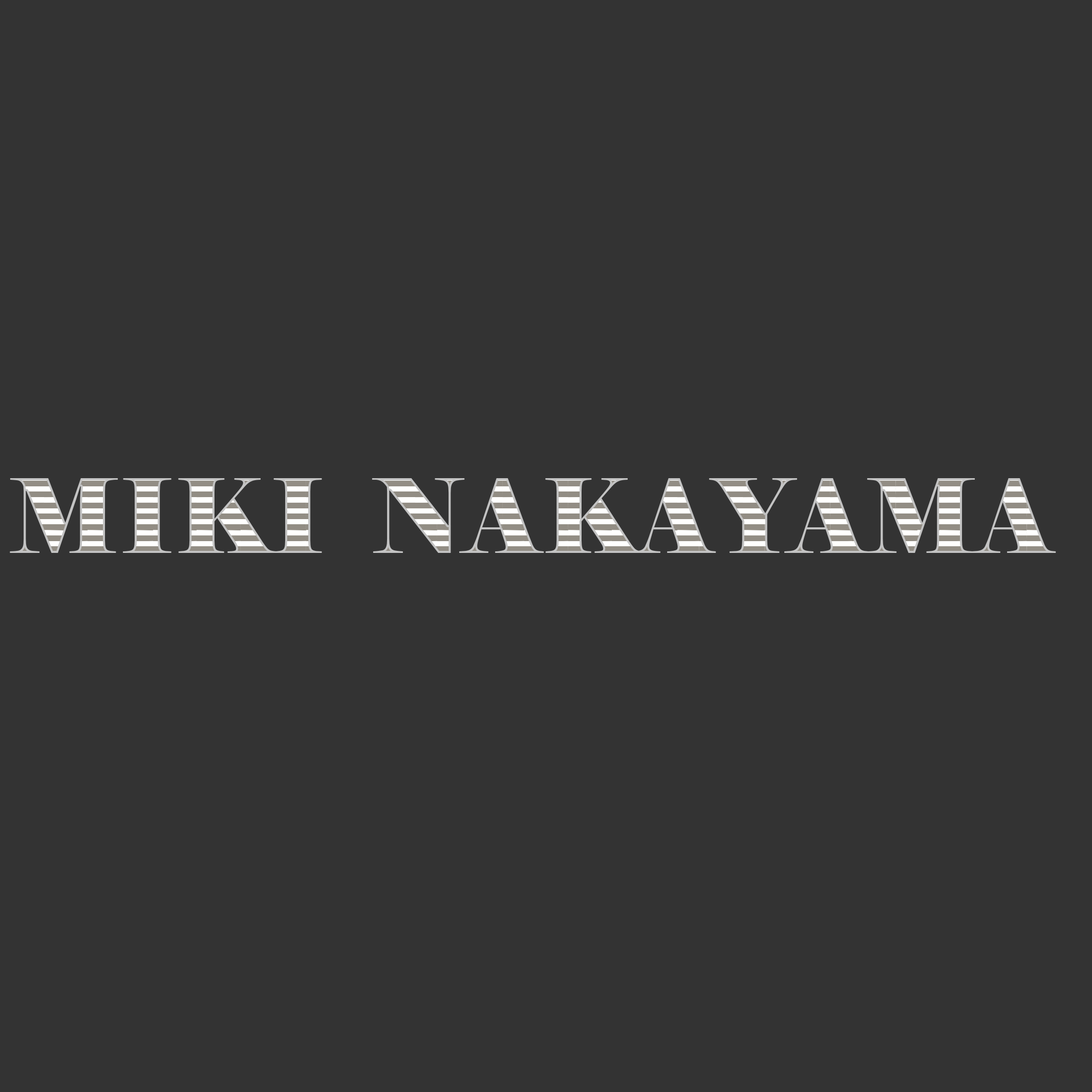
<style>
.page{position:relative;width:1092px;height:1092px;background:#333333}
.page>*{position:absolute;margin:0}
.t1{font:102.4px "Elephant-Regular"}
</style>
<div class="page">
<p class="t1" style="left:10px;top:478px;width:1046px;height:75px">MIKI  NAKAYAMA</p>
</div>
